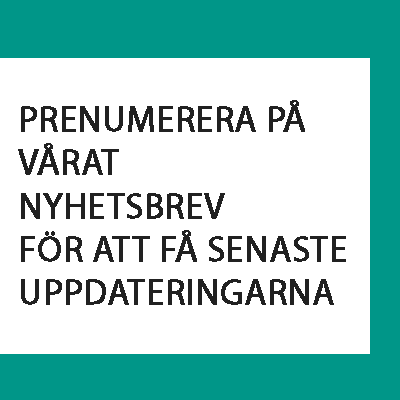
<style>
.page{position:relative;width:400px;height:400px;background:#ffffff}
.page>*{position:absolute;margin:0}
.t1{font:36px "MyriadPro-Regular";color:#212121;font-weight:bold}
</style>
<div class="page">
<p class="t1" style="left:18px;top:100px;width:328px;height:205px">PRENUMERERA PÅ<br>VÅRAT<br>NYHETSBREV<br>FÖR ATT FÅ SENASTE<br>UPPDATERINGARNA</p>
</div>
